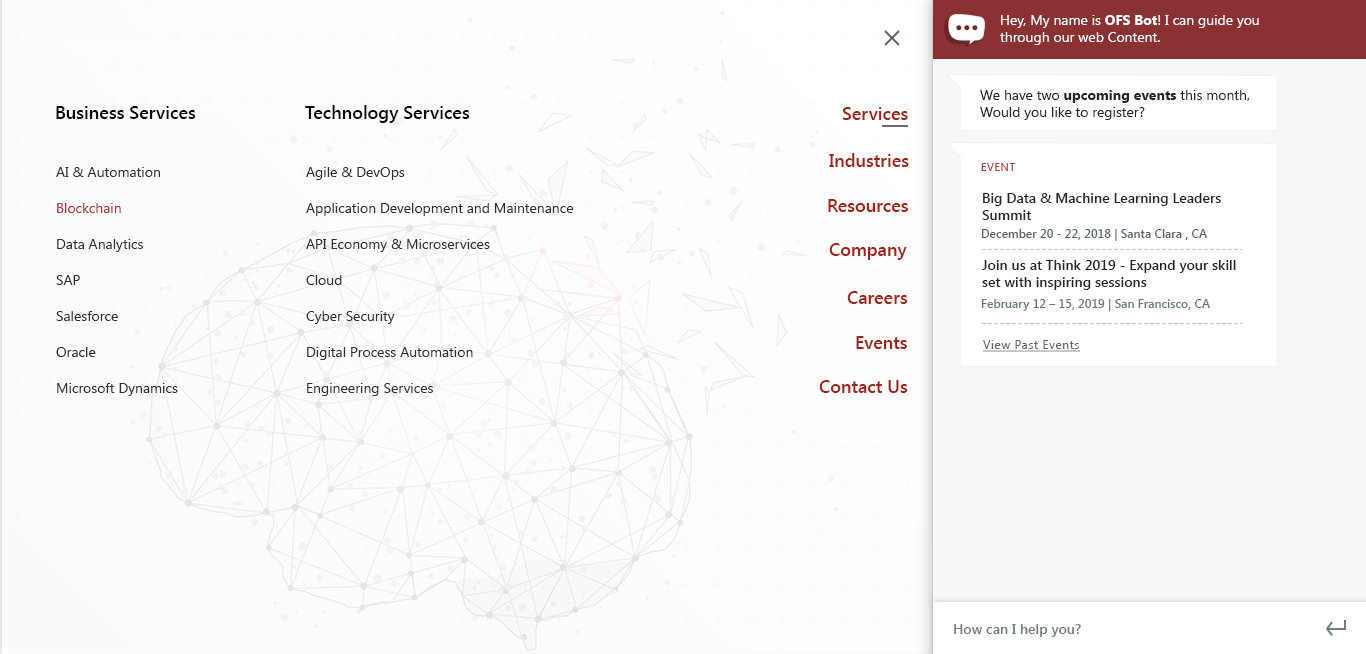
<style>
.page{position:relative;width:1366px;height:654px}
.page>*{position:absolute;margin:0}
.t1{font:14px "SegoeUI";color:#ffffff}
.t2{font:14px "SegoeUI-Bold";color:#ffffff}
.t3{font:14px "SegoeUI";color:#1d262f}
.t4{font:14px "SegoeUI-Bold";color:#1d262f}
.t5{font:18px "SegoeUI-SemiBold";color:#080808}
.t6{font:18px "SegoeUI-SemiBold";color:#9c241a}
.t7{font:14px/36px "SegoeUI";color:#2e2e2e}
.t8{font:14px/36px "SegoeUI";color:#aa3737}
.t9{font:11px "SegoeUI";letter-spacing:0.05em;color:#993f3f;text-transform:uppercase}
.t10{font:14px "SegoeUI-SemiBold";color:#1d262f}
.t11{font:12px "SegoeUI-SemiBold";color:#566671}
.t12{font:12px "SegoeUI-SemiBold";color:#657781}
.t13{font:12px "SegoeUI";letter-spacing:0.05em;color:#636363;text-decoration:underline}
.t14{font:14px "SegoeUI-SemiBold";color:#6f7d87}
</style>
<div class="page">
<p class="t1" style="left:1000px;top:15px;width:259px;height:30px">Hey, My name is <span class="t2">OFS Bot</span>! I can guide you through our web Content.</p>
<p class="t3" style="left:980px;top:90px;width:270px;height:30px">We have two <span class="t4">upcoming events</span> this month,<br>Would you like to register?</p>
<p class="t5" style="left:56px;top:106px;width:140px;height:13px">Business Services</p>
<p class="t5" style="left:305px;top:105px;width:165px;height:18px">Technology Services</p>
<p class="t6" style="left:842px;top:107px;width:66px;height:13px">Services</p>
<p class="t6" style="left:829px;top:153px;width:80px;height:14px">Industries</p>
<p class="t7" style="left:56px;top:167px;width:122px;height:229px">AI &amp; Automation<br><span class="t8">Blockchain<br></span>Data Analytics<br>SAP<br>Salesforce<br>Oracle<br>Microsoft Dynamics</p>
<p class="t7" style="left:306px;top:167px;width:268px;height:229px">Agile &amp; DevOps<br>Application Development and Maintenance<br>API Economy &amp; Microservices<br>Cloud<br>Cyber Security<br>Digital Process Automation<br>Engineering Services</p>
<p class="t9" style="left:981px;top:163px;width:35px;height:8px">Event</p>
<p class="t10" style="left:982px;top:193px;width:239px;height:27px">Big Data &amp; Machine Learning Leaders Summit</p>
<p class="t6" style="left:828px;top:199px;width:80px;height:13px">Resources</p>
<p class="t11" style="left:981px;top:229px;width:226px;height:12px">December 20 - 22, 2018 | Santa Clara , CA</p>
<p class="t6" style="left:829px;top:243px;width:78px;height:17px">Company</p>
<p class="t10" style="left:982px;top:260px;width:254px;height:30px">Join us at Think 2019 - Expand your skill set with inspiring sessions</p>
<p class="t6" style="left:847px;top:291px;width:61px;height:13px">Careers</p>
<p class="t12" style="left:981px;top:299px;width:229px;height:12px">February 12 – 15, 2019 | San Francisco, CA</p>
<p class="t6" style="left:856px;top:336px;width:51px;height:13px">Events</p>
<p class="t13" style="left:983px;top:340px;width:98px;height:12px">View Past Events</p>
<p class="t6" style="left:819px;top:380px;width:89px;height:13px">Contact Us</p>
<p class="t14" style="left:954px;top:624px;width:127px;height:13px">How can I help you?</p>
</div>
